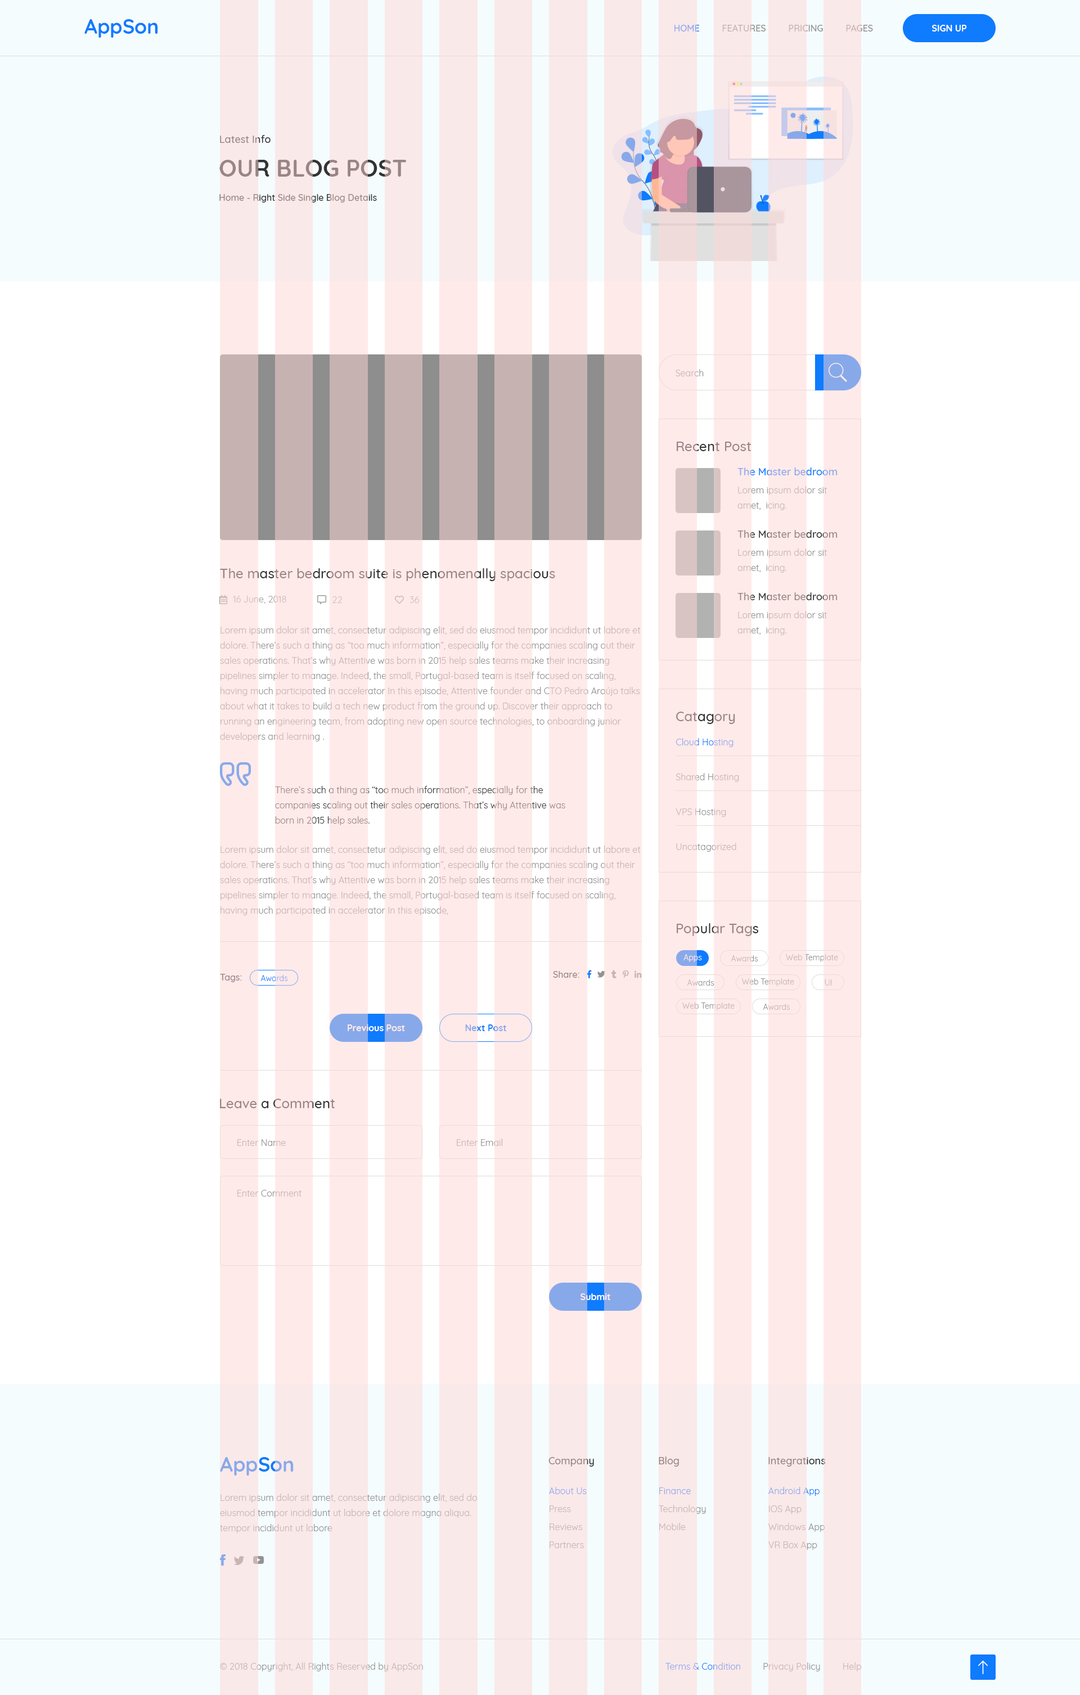
<style>
.page{position:relative;width:1080px;height:1695px;background:#ffffff}
.page>*{position:absolute;margin:0}
.t1{font:20.2px "Quicksand-Bold";color:#0f7bff}
.t2{font:9px "Quicksand-Medium";text-transform:uppercase}
.t3{font:9px "Quicksand-Bold";color:#ffffff}
.t4{font:10.1px "Quicksand-Medium";color:#998585}
.t5{font:23.6px "Quicksand-Bold";color:#998585;text-transform:uppercase}
.t6{font:9px "Quicksand-Medium";color:#998585}
.t7{font:9px "Quicksand-Regular";color:#c9b4b4}
.t8{font:13.5px "Quicksand-Medium";color:#998585}
.t9{font:10.1px "Quicksand-Medium"}
.t10{font:9px/15.2px "Quicksand-Regular"}
.t11{font:13.5px "Quicksand-Medium"}
.t12{font:9px "Quicksand-Regular";color:#d2bdbd}
.t13{font:9px/15.2px "Quicksand-Regular";color:#c9b4b4}
.t14{font:9px "Quicksand-Regular";color:#87a9ea}
.t15{font:9px/15.2px "Quicksand-Regular";color:#998585}
.t16{font:9px "Quicksand-Regular"}
.t17{font:7.9px "Quicksand-Regular";color:#ffffff}
.t18{font:7.9px "Quicksand-Regular"}
.t19{font:7.9px "Quicksand-Regular";color:#929292}
.t20{font:7.9px "Quicksand-Regular";color:#c9b4b4}
.t21{font:9px "Quicksand-Bold"}
.t22{font:20.2px "Quicksand-Bold";color:#87a9ea}
</style>
<div class="page">
<p class="t1" style="left:84px;top:19px;width:74px;height:19px">AppSon</p>
<p class="t2" style="left:674px;top:25px;width:199px;height:7px">Home         Features         Pricing         Pages</p>
<p class="t3" style="left:932px;top:25px;width:35px;height:7px">SIGN UP</p>
<p class="t4" style="left:220px;top:135px;width:51px;height:8px">Latest Info</p>
<p class="t5" style="left:219px;top:160px;width:187px;height:17px">Our Blog Post</p>
<p class="t6" style="left:219px;top:194px;width:158px;height:8px">Home - Right Side Single Blog Details</p>
<p class="t7" style="left:676px;top:369px;width:28px;height:7px">Search</p>
<p class="t8" style="left:677px;top:442px;width:75px;height:9px">Recent Post</p>
<p class="t9" style="left:737px;top:467px;width:101px;height:8px">The Master bedroom</p>
<p class="t10" style="left:737px;top:486px;width:90px;height:24px">Lorem ipsum dolor sit amet,  icing.</p>
<p class="t9" style="left:737px;top:530px;width:101px;height:8px">The Master bedroom</p>
<p class="t10" style="left:737px;top:548px;width:90px;height:25px">Lorem ipsum dolor sit amet,  icing.</p>
<p class="t11" style="left:220px;top:568px;width:335px;height:13px">The master bedroom suite is phenomenally spacious</p>
<p class="t9" style="left:737px;top:592px;width:101px;height:8px">The Master bedroom</p>
<p class="t12" style="left:233px;top:596px;width:53px;height:8px">16 June, 2018</p>
<p class="t12" style="left:332px;top:596px;width:10px;height:7px">22</p>
<p class="t12" style="left:410px;top:596px;width:9px;height:7px">36</p>
<p class="t10" style="left:737px;top:611px;width:90px;height:24px">Lorem ipsum dolor sit amet,  icing.</p>
<p class="t13" style="left:220px;top:626px;width:421px;height:115px">Lorem ipsum dolor sit amet, consectetur adipiscing elit, sed do eiusmod tempor incididunt ut labore et dolore. There’s such a thing as “too much information”, especially for the companies scaling out their sales operations. That’s why Attentive was born in 2015 help sales teams make their increasing pipelines simpler to manage. Indeed, the small, Portugal-based team is itself focused on scaling, having much participated in accelerator In this episode, Attentive founder and CTO Pedro Araújo talks about what it takes to build a tech new product from the ground up. Discover their approach to running an engineering team, from adopting new open source technologies, to onboarding junior developers and learning .</p>
<p class="t11" style="left:676px;top:712px;width:59px;height:12px">Catagory</p>
<p class="t14" style="left:676px;top:738px;width:58px;height:9px">Cloud Hosting</p>
<p class="t7" style="left:676px;top:773px;width:63px;height:9px">Shared Hosting</p>
<p class="t15" style="left:275px;top:786px;width:290px;height:39px">There’s such a thing as “too much information”, especially for the companies scaling out their sales operations. That’s why Attentive was born in 2015 help sales.</p>
<p class="t16" style="left:676px;top:808px;width:50px;height:9px">VPS Hosting</p>
<p class="t10" style="left:220px;top:845px;width:421px;height:70px">Lorem ipsum dolor sit amet, consectetur adipiscing elit, sed do eiusmod tempor incididunt ut labore et dolore. There’s such a thing as “too much information”, especially for the companies scaling out their sales operations. That’s why Attentive was born in 2015 help sales teams make their increasing pipelines simpler to manage. Indeed, the small, Portugal-based team is itself focused on scaling, having much participated in accelerator In this episode,</p>
<p class="t7" style="left:676px;top:843px;width:60px;height:9px">Uncatagorized</p>
<p class="t8" style="left:677px;top:923px;width:81px;height:13px">Popular Tags</p>
<p class="t17" style="left:683px;top:954px;width:19px;height:8px">Apps</p>
<p class="t18" style="left:731px;top:955px;width:27px;height:6px">Awards</p>
<p class="t18" style="left:786px;top:954px;width:52px;height:8px">Web Template</p>
<p class="t6" style="left:220px;top:974px;width:22px;height:8px">Tags:</p>
<p class="t18" style="left:260px;top:975px;width:28px;height:6px">Awards</p>
<p class="t6" style="left:553px;top:971px;width:26px;height:7px">Share:</p>
<p class="t19" style="left:687px;top:979px;width:27px;height:7px">Awards</p>
<p class="t18" style="left:742px;top:978px;width:52px;height:8px">Web Template</p>
<p class="t20" style="left:825px;top:979px;width:7px;height:7px">UI</p>
<p class="t20" style="left:682px;top:1002px;width:53px;height:8px">Web Template</p>
<p class="t20" style="left:763px;top:1004px;width:27px;height:6px">Awards</p>
<p class="t3" style="left:348px;top:1024px;width:57px;height:7px">Previous Post</p>
<p class="t21" style="left:465px;top:1024px;width:42px;height:7px">Next Post</p>
<p class="t8" style="left:220px;top:1099px;width:115px;height:9px">Leave a Comment</p>
<p class="t7" style="left:237px;top:1139px;width:49px;height:7px">Enter Name</p>
<p class="t16" style="left:457px;top:1138px;width:45px;height:8px">Enter Email</p>
<p class="t7" style="left:237px;top:1190px;width:65px;height:6px">Enter Comment</p>
<p class="t3" style="left:580px;top:1293px;width:30px;height:7px">Submit</p>
<p class="t22" style="left:220px;top:1457px;width:74px;height:18px">AppSon</p>
<p class="t4" style="left:548px;top:1457px;width:46px;height:9px">Company</p>
<p class="t4" style="left:659px;top:1456px;width:20px;height:10px">Blog</p>
<p class="t4" style="left:768px;top:1457px;width:58px;height:9px">Integrations</p>
<p class="t10" style="left:220px;top:1493px;width:257px;height:40px">Lorem ipsum dolor sit amet, consectetur adipiscing elit, sed do eiusmod tempor incididunt ut labore et dolore magna aliqua. tempor incididunt ut labore</p>
<p class="t14" style="left:549px;top:1487px;width:38px;height:7px">About Us</p>
<p class="t14" style="left:659px;top:1487px;width:32px;height:7px">Finance</p>
<p class="t16" style="left:768px;top:1487px;width:52px;height:9px">Android App</p>
<p class="t7" style="left:550px;top:1505px;width:21px;height:7px">Press</p>
<p class="t7" style="left:659px;top:1505px;width:47px;height:9px">Technology</p>
<p class="t7" style="left:769px;top:1505px;width:33px;height:9px">IOS App</p>
<p class="t7" style="left:550px;top:1523px;width:32px;height:7px">Reviews</p>
<p class="t7" style="left:659px;top:1523px;width:27px;height:7px">Mobile</p>
<p class="t16" style="left:768px;top:1523px;width:57px;height:9px">Windows App</p>
<p class="t7" style="left:550px;top:1541px;width:34px;height:7px">Partners</p>
<p class="t7" style="left:768px;top:1541px;width:49px;height:9px">VR Box App</p>
<p class="t7" style="left:220px;top:1662px;width:203px;height:9px">© 2018 Copyright, All Rights Reserved by AppSon</p>
<p class="t16" style="left:665px;top:1662px;width:196px;height:9px">Terms &amp; Condition         Privacy Policy         Help</p>
</div>
